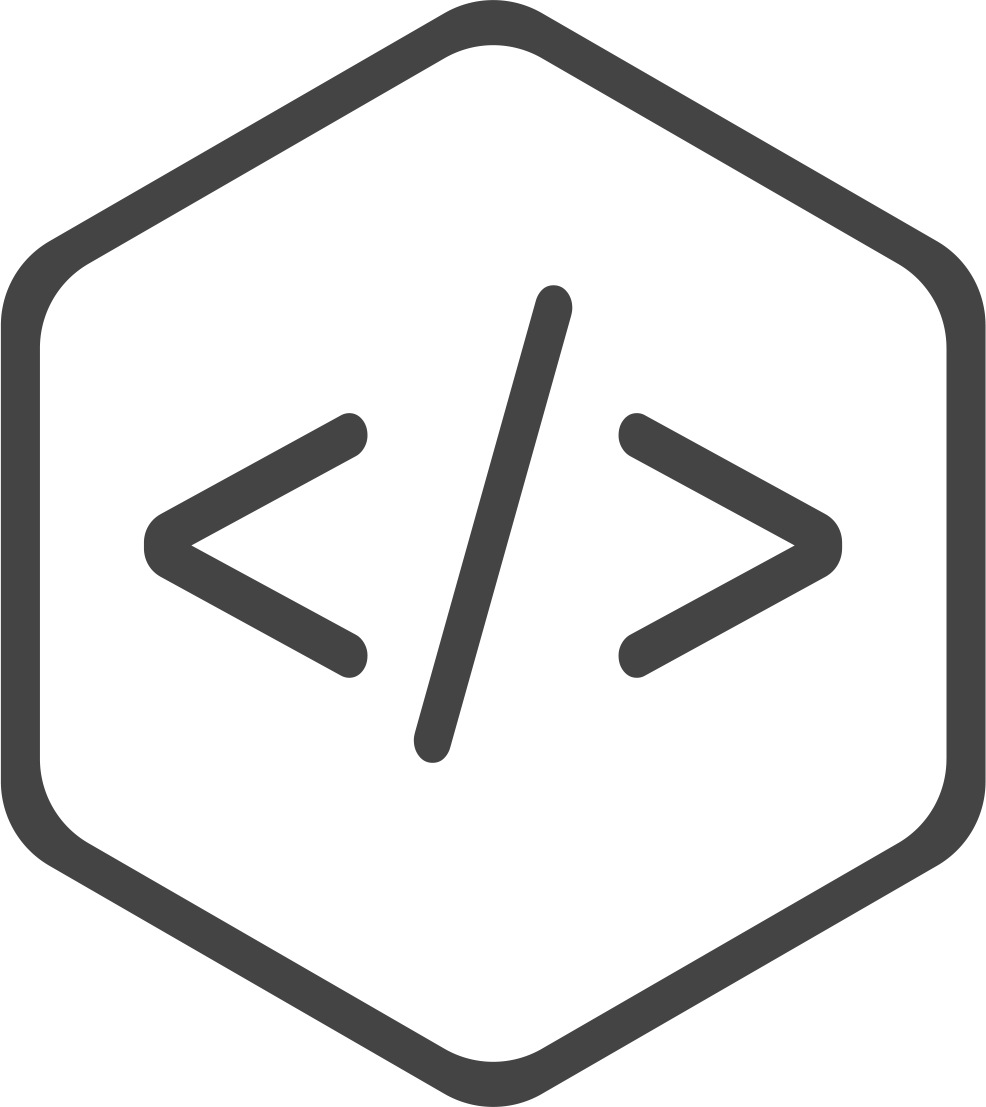
<style>
.page{position:relative;width:986px;height:1107px;background:#ffffff}
.page>*{position:absolute;margin:0}
.t1{font:555.9px "VarelaRound-Regular";color:#444444;scale:0.82 1}
</style>
<div class="page">
<p class="t1" style="left:143px;top:285px;width:700px;height:478px">&lt;/&gt;</p>
</div>
